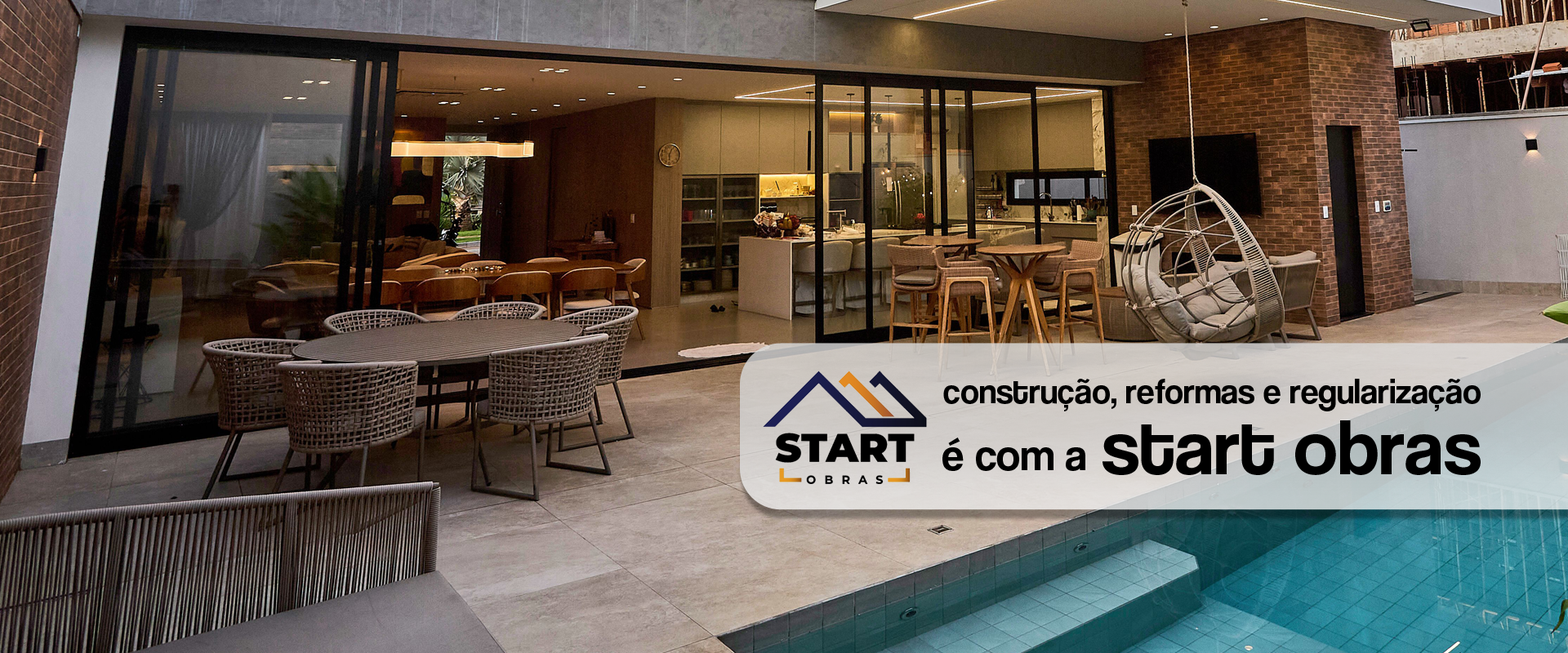
<style>
.page{position:relative;width:1568px;height:653px}
.page>*{position:absolute;margin:0}
.t1{font:35.1px "Coolvetica-Regular";color:#000000}
.t2{font:79.6px "Coolvetica-Regular";color:#000000}
.t3{font:44.7px "Coolvetica-Regular";color:#000000}
</style>
<div class="page">
<p class="t1" style="left:943px;top:379px;width:538px;height:33px">construção, reformas e regularização</p>
<p class="t2" style="left:1102px;top:421px;width:379px;height:54px">start obras</p>
<p class="t3" style="left:942px;top:438px;width:143px;height:33px">é com a</p>
</div>
